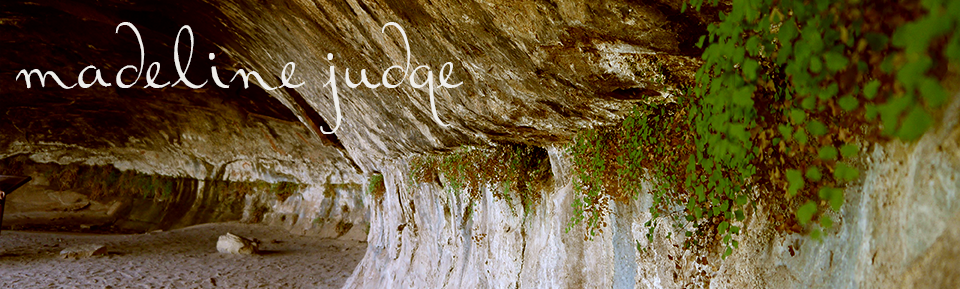
<style>
.page{position:relative;width:960px;height:289px}
.page>*{position:absolute;margin:0}
.t1{font:90px "RalphWalker";color:#eeedea}
</style>
<div class="page">
<p class="t1" style="left:16px;top:22px;width:448px;height:112px">madeline judge</p>
</div>
